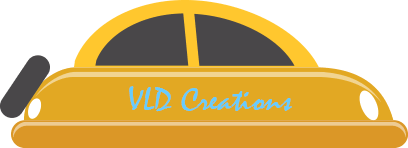
<style>
.page{position:relative;width:408px;height:148px;background:#ffffff}
.page>*{position:absolute;margin:0}
.t1{font:33.5px "Mistral";color:#66ccff;scale:1.07 1}
</style>
<div class="page">
<p class="t1" style="left:129px;top:86px;width:163px;height:26px">VLD Creations</p>
</div>
